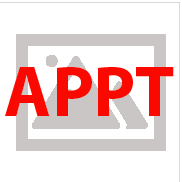
<style>
.page{position:relative;width:182px;height:182px;background:#ffffff}
.page>*{position:absolute;margin:0}
.t1{font:72px "MyriadPro-Bold";color:#fa0900}
</style>
<div class="page">
<p class="t1" style="left:5px;top:67px;width:169px;height:49px">APPT</p>
</div>
